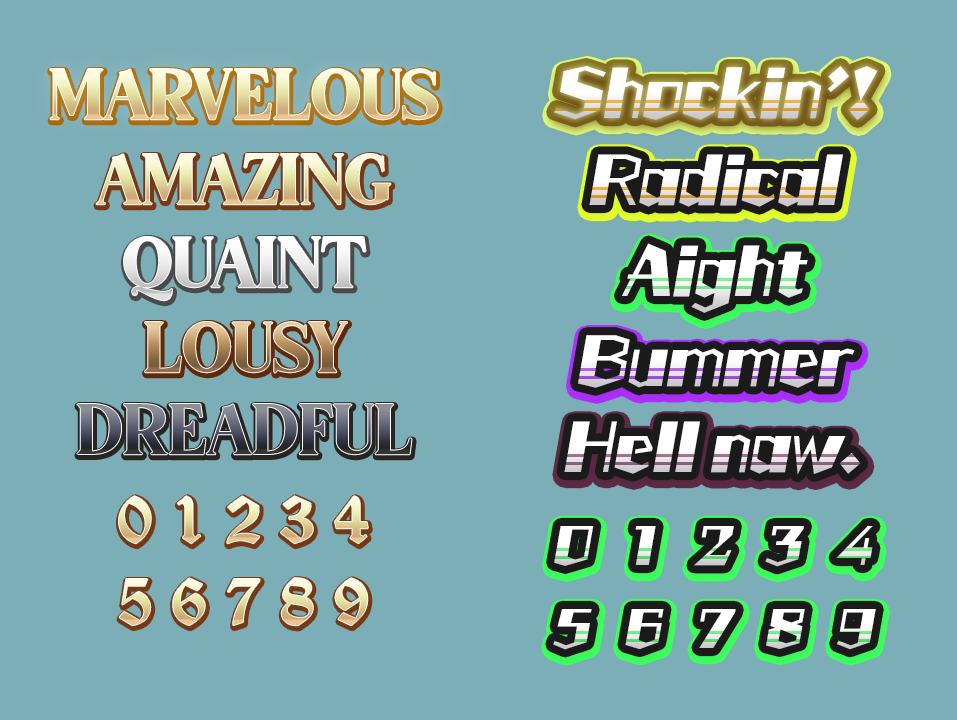
<style>
.page{position:relative;width:957px;height:720px;background:#7caeb7}
.page>*{position:absolute;margin:0}
.t1{font:69px "BackslashRegular";letter-spacing:0.01em}
.t2{font:55.8px "CaratStd-UB";color:#ffffff;font-style:italic}
.t3{font:55.8px "CaratStd-UB";font-style:italic}
.t4{font:69px "BackslashRegular";letter-spacing:0.01em;color:#ececec}
.t5{font:69px "OldEnglishTextMT";letter-spacing:0.01em}
.t6{font:43px "CaratStd-UB";color:#ffffff;font-style:italic}
</style>
<div class="page">
<p class="t1" style="left:50px;top:69px;width:388px;height:51px">MARVELOUS</p>
<p class="t2" style="left:554px;top:66px;width:324px;height:54px">Shockin’!</p>
<p class="t1" style="left:96px;top:154px;width:295px;height:51px">AMAZING</p>
<p class="t3" style="left:589px;top:154px;width:254px;height:53px">Radical</p>
<p class="t4" style="left:124px;top:237px;width:242px;height:64px">QUAINT</p>
<p class="t2" style="left:622px;top:243px;width:186px;height:70px">Aight</p>
<p class="t1" style="left:145px;top:322px;width:202px;height:51px">LOUSY</p>
<p class="t3" style="left:578px;top:335px;width:277px;height:53px">Bummer</p>
<p class="t2" style="left:564px;top:421px;width:297px;height:54px">Hell naw.</p>
<p class="t5" style="left:119px;top:496px;width:249px;height:48px">0 1 2 3 4</p>
<p class="t6" style="left:554px;top:526px;width:319px;height:41px">0   1   2   3   4</p>
<p class="t5" style="left:119px;top:578px;width:249px;height:48px">5 6 7 8 9</p>
<p class="t6" style="left:553px;top:609px;width:323px;height:41px">5   6   7   8   9</p>
</div>
